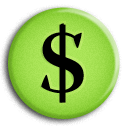
<style>
.page{position:relative;width:128px;height:128px;background:#ffffff}
.page>*{position:absolute;margin:0}
.t1{font:100px "WarnockPro-SemiboldSubh";color:#000000}
</style>
<div class="page">
<p class="t1" style="left:41px;top:23px;width:43px;height:80px">$</p>
</div>
